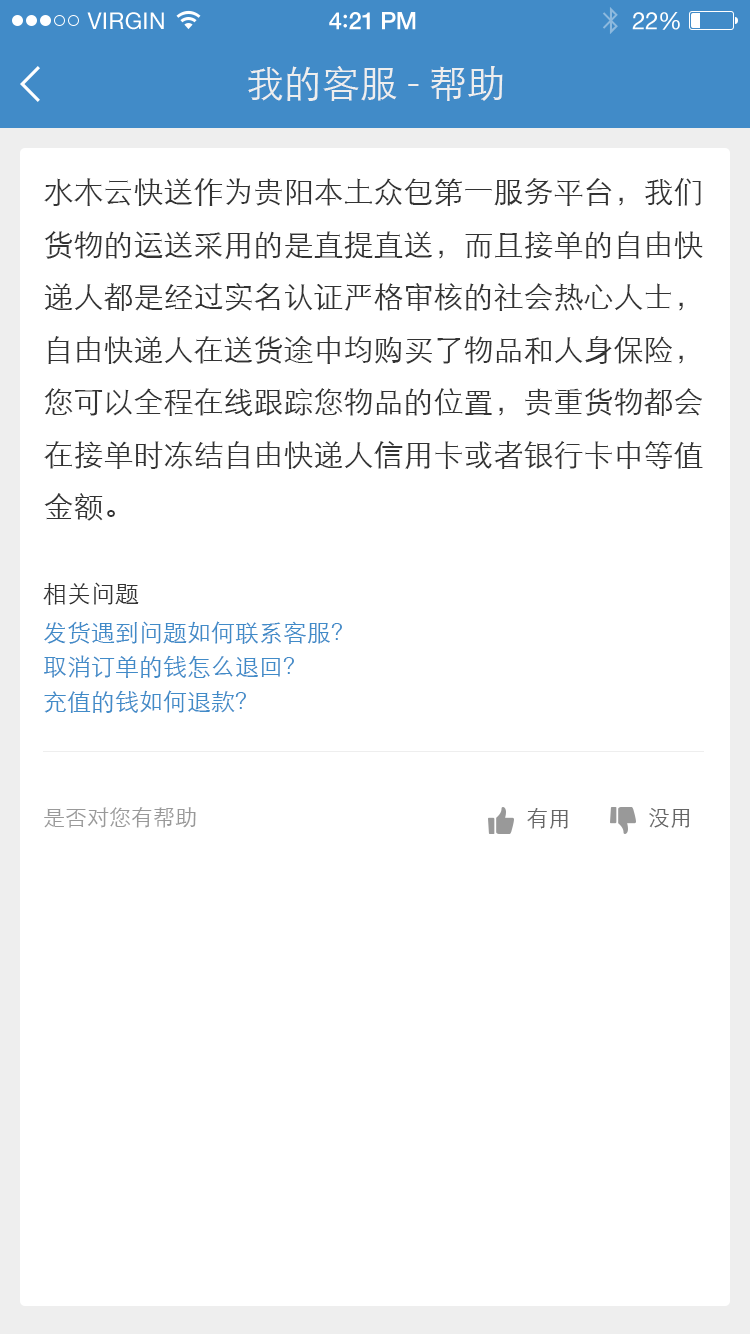
<style>
.page{position:relative;width:750px;height:1334px;background:#ffffff}
.page>*{position:absolute;margin:0}
.t1{font:23px "HelveticaNeue";letter-spacing:0.02em;color:#ffffff}
.t2{font:24px "HelveticaNeue-Medium";letter-spacing:-0.02em;color:#ffffff}
.t3{font:26px "Avenir-Medium";letter-spacing:-0.02em;color:#ffffff}
.t4{font:24px "HelveticaNeue";letter-spacing:-0.02em;color:#ffffff}
.t5{font:38px "STXihei";color:#eeeeee}
.t6{font:30px "STXihei";color:#333333}
.t7{font:24px "STXihei";color:#333333}
.t8{font:24px "STXihei";color:#418bc8}
.t9{font:22px "STXihei";color:#999999}
.t10{font:22px "STXihei";color:#666666}
</style>
<div class="page">
<p class="t1" style="left:87px;top:12px;width:77px;height:18px">VIRGIN</p>
<p class="t2" style="left:329px;top:12px;width:87px;height:18px">4<span class="t3">:</span>21 PM</p>
<p class="t4" style="left:632px;top:12px;width:48px;height:18px">22%</p>
<p class="t5" style="left:248px;top:66px;width:255px;height:35px">我的客服-帮助</p>
<p class="t6" style="left:44px;top:178px;width:659px;height:343px">水木云快送作为贵阳本土众包第一服务平台，我们货物的运送采用的是直提直送，而且接单的自由快递人都是经过实名认证严格审核的社会热心人士，自由快递人在送货途中均购买了物品和人身保险，您可以全程在线跟踪您物品的位置，贵重货物都会在接单时冻结自由快递人信用卡或者银行卡中等值金额。</p>
<p class="t7" style="left:43px;top:582px;width:96px;height:23px">相关问题</p>
<p class="t8" style="left:44px;top:621px;width:298px;height:23px">发货遇到问题如何联系客服？</p>
<p class="t8" style="left:44px;top:655px;width:250px;height:23px">取消订单的钱怎么退回？</p>
<p class="t8" style="left:44px;top:690px;width:202px;height:23px">充值的钱如何退款？</p>
<p class="t9" style="left:44px;top:807px;width:152px;height:21px">是否对您有帮助</p>
<p class="t10" style="left:527px;top:808px;width:41px;height:21px">有用</p>
<p class="t10" style="left:649px;top:808px;width:41px;height:20px">没用</p>
</div>
